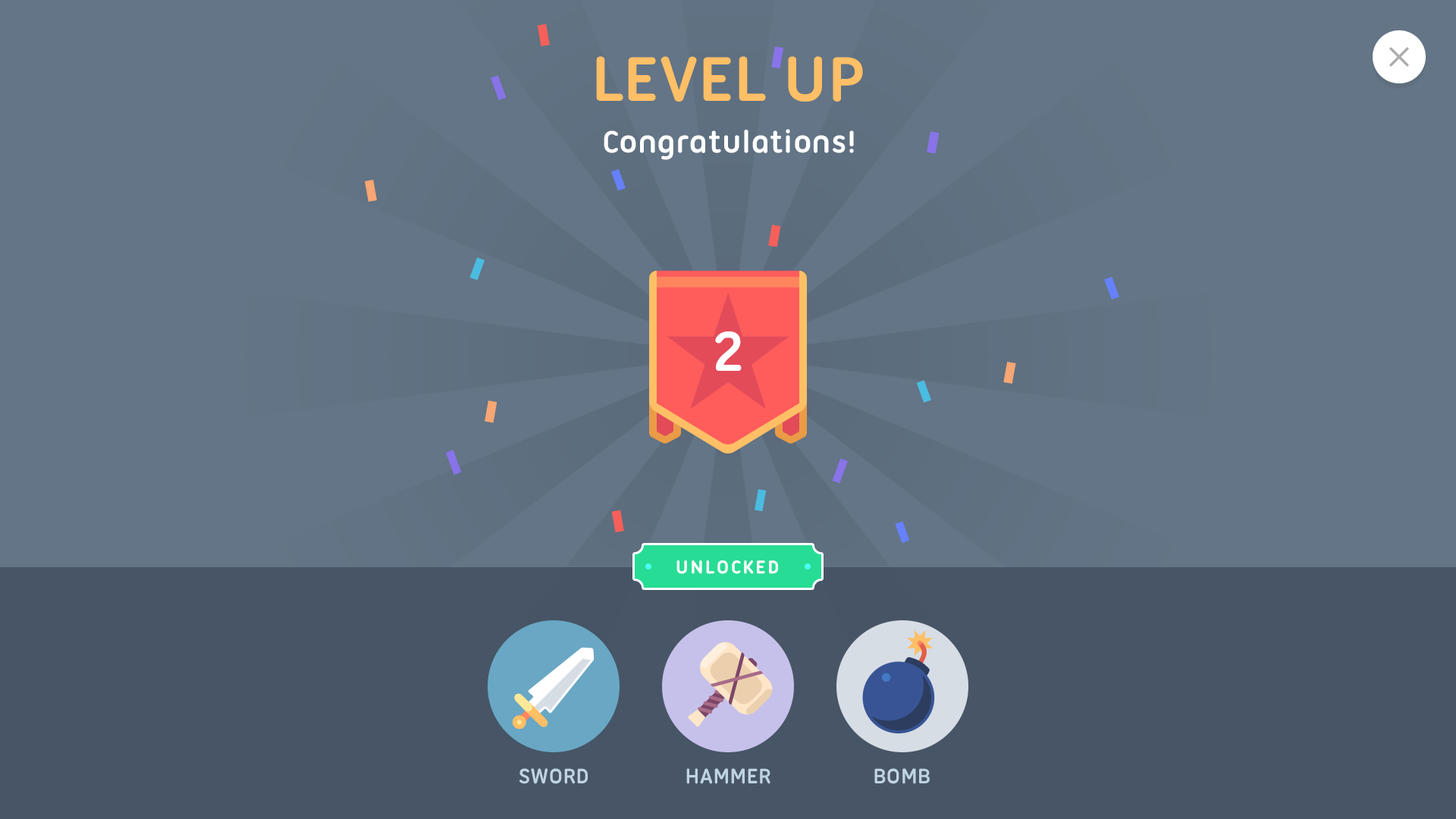
<style>
.page{position:relative;width:1456px;height:819px;background:#637586}
.page>*{position:absolute;margin:0}
.t1{font:68.2px "UbuntuTitling-Bold";color:#ffbf66;text-transform:uppercase}
.t2{font:33.4px "UbuntuTitling-Bold";color:#ffffff}
.t3{font:60.7px "UbuntuTitling-Bold";color:#ffffff;text-transform:uppercase}
.t4{font:19.7px "UbuntuTitling-Bold";letter-spacing:0.1em;color:#ffffff;text-transform:uppercase}
.t5{font:22.7px "UbuntuTitling-Bold";color:#bfd3e5;text-transform:uppercase}
</style>
<div class="page">
<p class="t1" style="left:596px;top:56px;width:267px;height:46px">LEVEL UP</p>
<p class="t2" style="left:604px;top:129px;width:250px;height:31px">Congratulations!</p>
<p class="t3" style="left:715px;top:331px;width:27px;height:40px">2</p>
<p class="t4" style="left:676px;top:560px;width:102px;height:14px">unlocked</p>
<p class="t5" style="left:519px;top:768px;width:69px;height:16px">sword</p>
<p class="t5" style="left:686px;top:768px;width:84px;height:16px">hammer</p>
<p class="t5" style="left:874px;top:768px;width:56px;height:16px">bomb</p>
</div>
